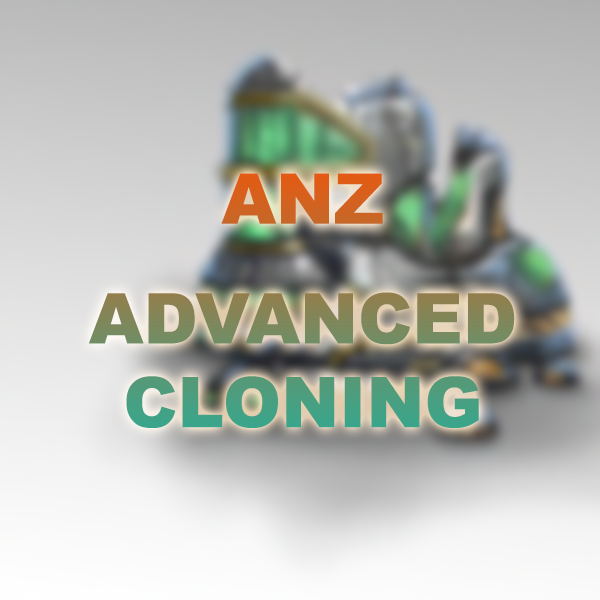
<style>
.page{position:relative;width:600px;height:600px}
.page>*{position:absolute;margin:0}
.t1{font:69.8px "Arial-Black"}
</style>
<div class="page">
<p class="t1" style="left:89px;top:173px;width:426px;height:255px;text-align:center">ANZ<br><br>ADVANCED<br>CLONING</p>
</div>
